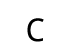
<style>
.page{position:relative;width:70px;height:55px;background:#ffffff}
.page>*{position:absolute;margin:0}
.t1{font:31.8px "DroidSans";color:#000000}
</style>
<div class="page">
<p class="t1" style="left:27px;top:18px;width:17px;height:24px">C</p>
</div>
